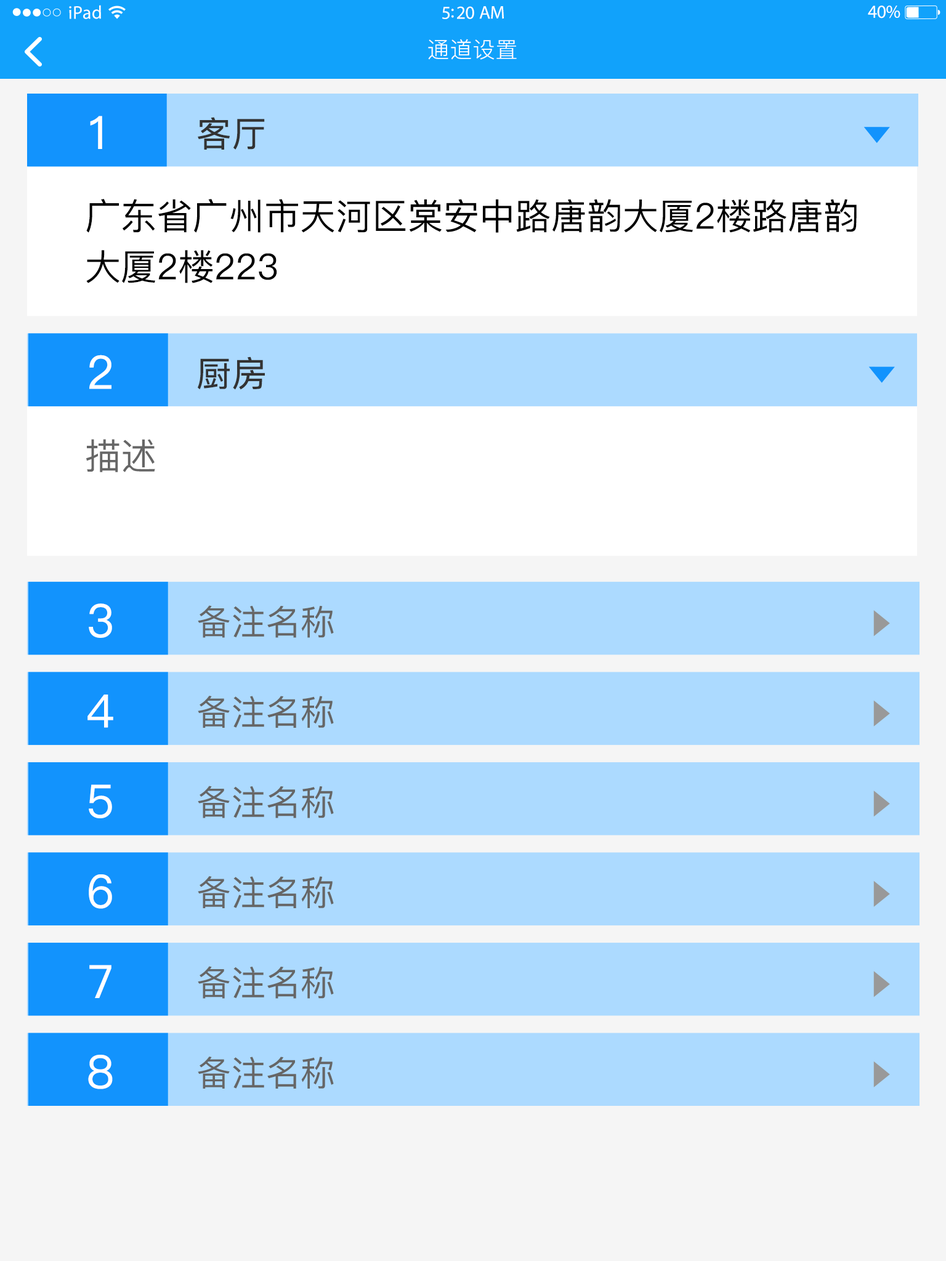
<style>
.page{position:relative;width:946px;height:1261px;background:#acdaff}
.page>*{position:absolute;margin:0}
.t1{font:18.5px "MyriadPro-Regular";letter-spacing:0.02em;color:#ffffff}
.t2{font:18.5px "MyriadPro-Regular";letter-spacing:-0.02em;color:#ffffff}
.t3{font:22.2px "PingFang-SC-Regular";letter-spacing:0.03em;color:#ffffff}
.t4{font:45.7px "PingFang-SC-Medium";color:#ffffff;font-weight:bold}
.t5{font:34.6px "PingFang-SC-Medium";color:#333333;font-weight:bold}
.t6{font:35.8px/50.7px "PingFang-SC-Medium";color:#000000}
.t7{font:35.8px "PingFang-SC-Medium";color:#666666}
.t8{font:34.6px "PingFang-SC-Medium";color:#666666}
</style>
<div class="page">
<p class="t1" style="left:69px;top:5px;width:32px;height:14px">iPad</p>
<p class="t2" style="left:867px;top:6px;width:33px;height:12px">40%</p>
<p class="t2" style="left:442px;top:6px;width:62px;height:13px">5:20 AM</p>
<p class="t3" style="left:428px;top:39px;width:89px;height:21px">通道设置</p>
<p class="t4" style="left:90px;top:116px;width:12px;height:33px">1</p>
<p class="t5" style="left:198px;top:117px;width:67px;height:33px">客厅</p>
<p class="t6" style="left:86px;top:199px;width:770px;height:84px">广东省广州市天河区棠安中路唐韵大厦2楼路唐韵<br>大厦2楼223</p>
<p class="t4" style="left:89px;top:355px;width:22px;height:34px">2</p>
<p class="t5" style="left:198px;top:356px;width:67px;height:34px">厨房</p>
<p class="t7" style="left:86px;top:439px;width:69px;height:33px">描述</p>
<p class="t4" style="left:89px;top:603px;width:23px;height:35px">3</p>
<p class="t8" style="left:198px;top:605px;width:136px;height:33px">备注名称</p>
<p class="t4" style="left:87px;top:694px;width:26px;height:34px">4</p>
<p class="t8" style="left:198px;top:696px;width:136px;height:32px">备注名称</p>
<p class="t4" style="left:89px;top:784px;width:23px;height:34px">5</p>
<p class="t8" style="left:198px;top:786px;width:136px;height:32px">备注名称</p>
<p class="t4" style="left:89px;top:874px;width:23px;height:35px">6</p>
<p class="t8" style="left:198px;top:876px;width:136px;height:32px">备注名称</p>
<p class="t4" style="left:89px;top:965px;width:22px;height:33px">7</p>
<p class="t8" style="left:198px;top:966px;width:136px;height:33px">备注名称</p>
<p class="t4" style="left:88px;top:1055px;width:25px;height:34px">8</p>
<p class="t8" style="left:198px;top:1057px;width:136px;height:32px">备注名称</p>
</div>
